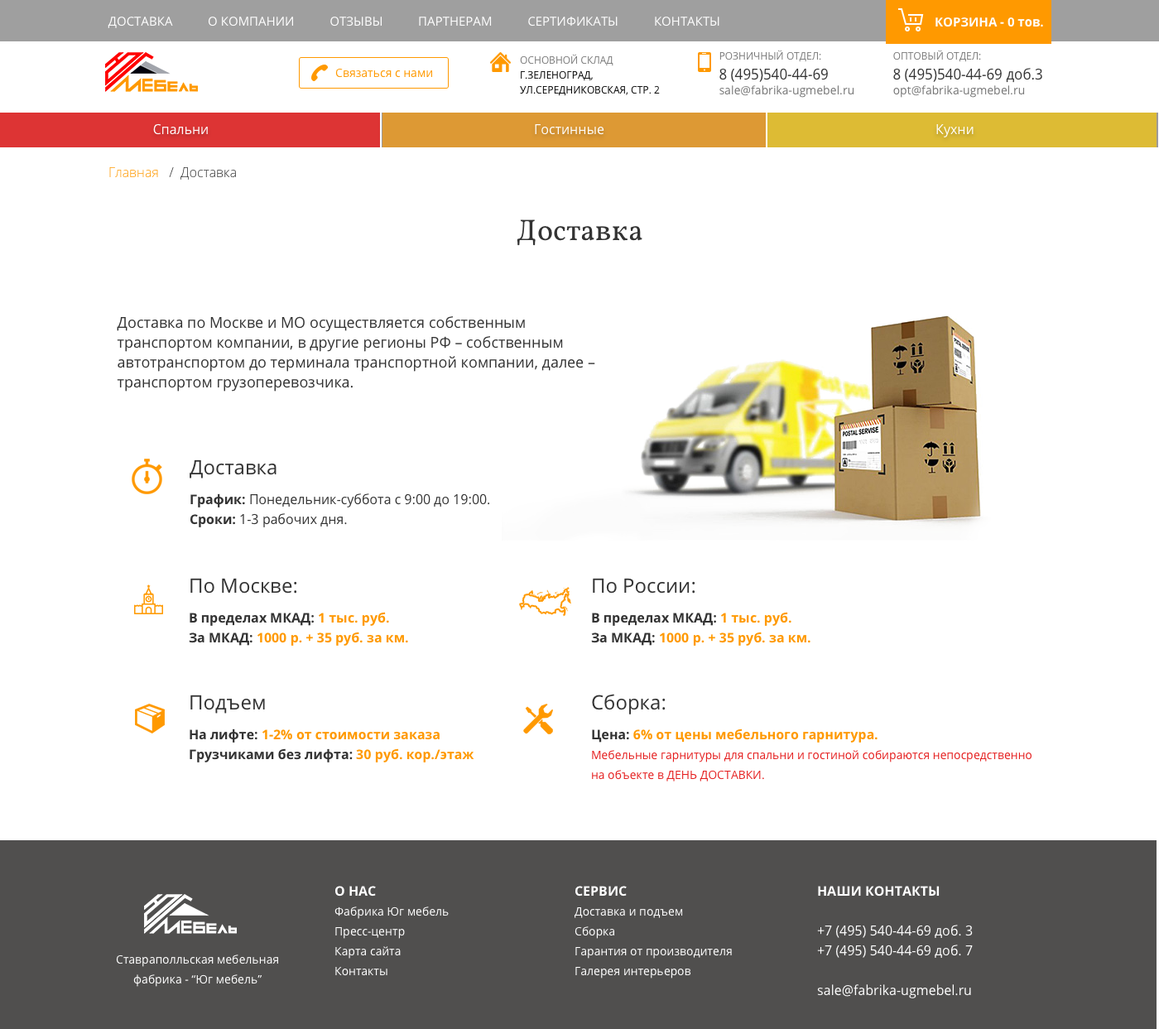
<style>
.page{position:relative;width:1159px;height:1029px;background:#ffffff}
.page>*{position:absolute;margin:0}
.t1{font:12.4px "OpenSans";color:#ffffff;text-transform:uppercase}
.t2{font:12.4px "OpenSans-Bold";color:#ffffff;text-transform:uppercase}
.t3{font:12.4px "OpenSans-Bold";color:#ffffff}
.t4{font:9.9px/14.9px "OpenSans";color:#000000;text-transform:uppercase}
.t5{font:9.9px/14.9px "OpenSans";color:#777777;text-transform:uppercase}
.t6{font:11.6px/14.9px "OpenSans";color:#777777}
.t7{font:14.1px/19.9px "OpenSans";color:#333333}
.t8{font:11.6px "OpenSans";color:#ff9900}
.t9{font:13.2px "OpenSans";color:#ffffff}
.t10{font:13.2px "OpenSans-Light";color:#333333}
.t11{font:13.2px "OpenSans-Light";color:#ff9900}
.t12{font:29.8px "Vollkorn-Regular";color:#333333}
.t13{font:14.9px/19.9px "OpenSans";color:#333333}
.t14{font:13.2px/29.8px "OpenSans";color:#333333}
.t15{font:19.9px/19.9px "OpenSans";color:#333333}
.t16{font:13.2px/29.8px "OpenSans-Bold";color:#333333}
.t17{font:13.2px/19.9px "OpenSans-Bold";color:#333333}
.t18{font:13.2px/19.9px "OpenSans";color:#333333}
.t19{font:13.2px/19.9px "OpenSans-Bold";color:#ff9900}
.t20{font:13.2px/29.8px "OpenSans-Bold";color:#ff9900}
.t21{font:11.6px/19.9px "OpenSans";color:#e52020}
.t22{font:11.6px/19.9px "OpenSans";color:#ffffff}
.t23{font:13.2px/19.9px "OpenSans-Bold";color:#ffffff;text-transform:uppercase}
.t24{font:13.2px/19.9px "OpenSans";color:#ffffff}
</style>
<div class="page">
<p class="t1" style="left:108px;top:17px;width:611px;height:11px">Доставка           О компании           Отзывы           Партнерам           Сертификаты           Контакты</p>
<p class="t2" style="left:935px;top:17px;width:108px;height:10px">Корзина - 0 <span class="t3">тов.</span></p>
<p class="t4" style="left:520px;top:54px;width:140px;height:42px"><span class="t5">Основной склад<br></span>г.Зеленоград, ул.Середниковская, стр. 2</p>
<p class="t6" style="left:719px;top:50px;width:135px;height:48px"><span class="t5">Розничный отдел:<br></span><span class="t7">8 (495)540-44-69<br></span>sale@fabrika-ugmebel.ru</p>
<p class="t7" style="left:893px;top:50px;width:149px;height:48px"><span class="t5">Оптовый отдел:<br></span>8 (495)540-44-69 доб.3<br><span class="t6">opt@fabrika-ugmebel.ru</span></p>
<p class="t8" style="left:335px;top:68px;width:97px;height:10px">Связаться с нами</p>
<p class="t9" style="left:153px;top:123px;width:55px;height:12px">Спальни</p>
<p class="t9" style="left:535px;top:124px;width:69px;height:11px">Гостинные</p>
<p class="t9" style="left:936px;top:124px;width:37px;height:13px">Кухни</p>
<p class="t10" style="left:109px;top:167px;width:127px;height:13px"><span class="t11">Главная</span>   /  Доставка</p>
<p class="t12" style="left:517px;top:219px;width:125px;height:27px">Доставка</p>
<p class="t13" style="left:117px;top:316px;width:478px;height:76px">Доставка по Москве и МО осуществляется собственным транспортом компании, в другие регионы РФ – собственным автотранспортом до терминала транспортной компании, далее – транспортом грузоперевозчика.</p>
<p class="t14" style="left:190px;top:459px;width:299px;height:68px"><span class="t15">Доставка<br></span><span class="t16">График: </span>Понедельник-суббота с 9:00 до 19:00.<br><span class="t17">Сроки:</span><span class="t18"> 1-3 рабочих дня.</span></p>
<p class="t19" style="left:189px;top:578px;width:219px;height:68px"><span class="t15">По Москве:<br></span><span class="t16">В пределах МКАД: </span><span class="t20">1 тыс. руб.<br></span><span class="t17">За МКАД: </span>1000 р. + 35 руб. за км.</p>
<p class="t19" style="left:591px;top:578px;width:219px;height:68px"><span class="t15">По России:<br></span><span class="t16">В пределах МКАД: </span><span class="t20">1 тыс. руб.<br></span><span class="t17">За МКАД: </span>1000 р. + 35 руб. за км.</p>
<p class="t20" style="left:190px;top:695px;width:284px;height:67px"><span class="t15">Подъем <br></span><span class="t16">На лифте: </span>1-2% от стоимости заказа<br><span class="t17">Грузчиками без лифта: </span><span class="t19">30 руб. кор./этаж</span></p>
<p class="t21" style="left:592px;top:694px;width:439px;height:87px"><span class="t15">Сборка:<br></span><span class="t16">Цена: </span><span class="t20">6% от цены мебельного гарнитура.<br></span>Мебельные гарнитуры для спальни и гостиной собираются непосредственно на объекте в ДЕНЬ ДОСТАВКИ.</p>
<p class="t22" style="left:334px;top:886px;width:115px;height:90px"><span class="t23">О нас<br></span>Фабрика Юг мебель<br>Пресс-центр<br>Карта сайта<br>Контакты</p>
<p class="t22" style="left:574px;top:886px;width:158px;height:92px"><span class="t23">Сервис<br></span>Доставка и подъем<br>Сборка<br>Гарантия от производителя<br>Галерея интерьеров</p>
<p class="t24" style="left:817px;top:886px;width:156px;height:112px"><span class="t23">Наши контакты<br><br></span>+7 (495) 540-44-69 доб. 3<br>+7 (495) 540-44-69 доб. 7<br><br>sale@fabrika-ugmebel.ru</p>
<p class="t22" style="left:116px;top:954px;width:162px;height:33px;text-align:center">Ставраполльская мебельная фабрика - “Юг мебель”</p>
</div>
